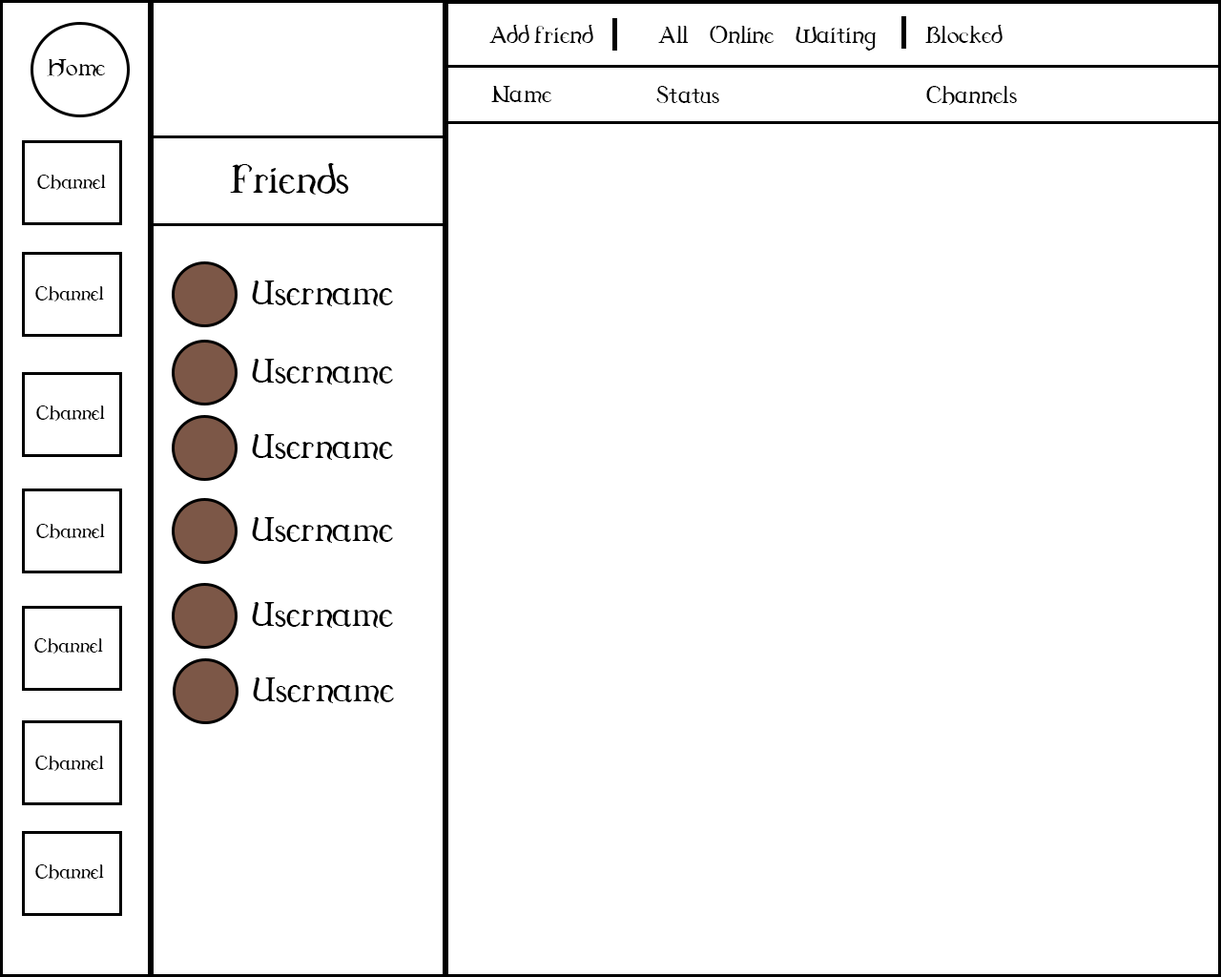
<style>
.page{position:relative;width:1221px;height:977px;background:#ffffff}
.page>*{position:absolute;margin:0}
.t1{font:34.3px "Dungeon";color:#000000}
.t2{font:58.3px "Dungeon";color:#000000}
.t3{font:28px "Dungeon";color:#000000}
.t4{font:50.5px "Dungeon";color:#000000}
</style>
<div class="page">
<p class="t1" style="left:489px;top:25px;width:104px;height:19px">Add friend</p>
<p class="t1" style="left:658px;top:26px;width:31px;height:17px">All</p>
<p class="t1" style="left:710px;top:26px;width:64px;height:18px">Online</p>
<p class="t1" style="left:795px;top:27px;width:82px;height:24px">Waiting</p>
<p class="t1" style="left:925px;top:25px;width:77px;height:18px">Blocked</p>
<p class="t1" style="left:47px;top:59px;width:59px;height:17px">Home</p>
<p class="t1" style="left:491px;top:86px;width:61px;height:17px">Name</p>
<p class="t1" style="left:656px;top:86px;width:63px;height:17px">Status</p>
<p class="t1" style="left:926px;top:86px;width:91px;height:19px">Channels</p>
<p class="t2" style="left:230px;top:163px;width:119px;height:32px">Friends</p>
<p class="t3" style="left:37px;top:175px;width:69px;height:15px">Channel</p>
<p class="t4" style="left:252px;top:280px;width:141px;height:26px">Username</p>
<p class="t3" style="left:35px;top:286px;width:69px;height:15px">Channel</p>
<p class="t4" style="left:252px;top:359px;width:141px;height:25px">Username</p>
<p class="t3" style="left:36px;top:405px;width:69px;height:16px">Channel</p>
<p class="t4" style="left:252px;top:434px;width:141px;height:26px">Username</p>
<p class="t4" style="left:252px;top:517px;width:141px;height:26px">Username</p>
<p class="t3" style="left:36px;top:524px;width:69px;height:15px">Channel</p>
<p class="t4" style="left:252px;top:602px;width:141px;height:26px">Username</p>
<p class="t3" style="left:34px;top:638px;width:69px;height:15px">Channel</p>
<p class="t4" style="left:253px;top:677px;width:141px;height:26px">Username</p>
<p class="t3" style="left:35px;top:755px;width:69px;height:16px">Channel</p>
<p class="t3" style="left:35px;top:864px;width:69px;height:15px">Channel</p>
</div>
